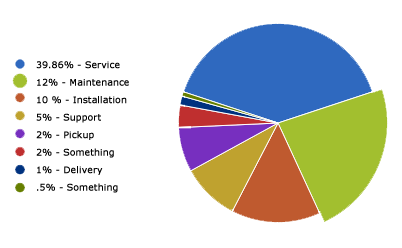
<style>
.page{position:relative;width:402px;height:248px;background:#ffffff}
.page>*{position:absolute;margin:0}
.t1{font:9px/17.5px "Verdana";color:#000000;font-weight:bold}
</style>
<div class="page">
<p class="t1" style="left:36px;top:61px;width:93px;height:132px">39.86% - Service<br>12% - Maintenance<br>10 % - Installation<br>5% - Support<br>2% - Pickup<br>2% - Something<br>1% - Delivery<br>.5% - Something</p>
</div>
